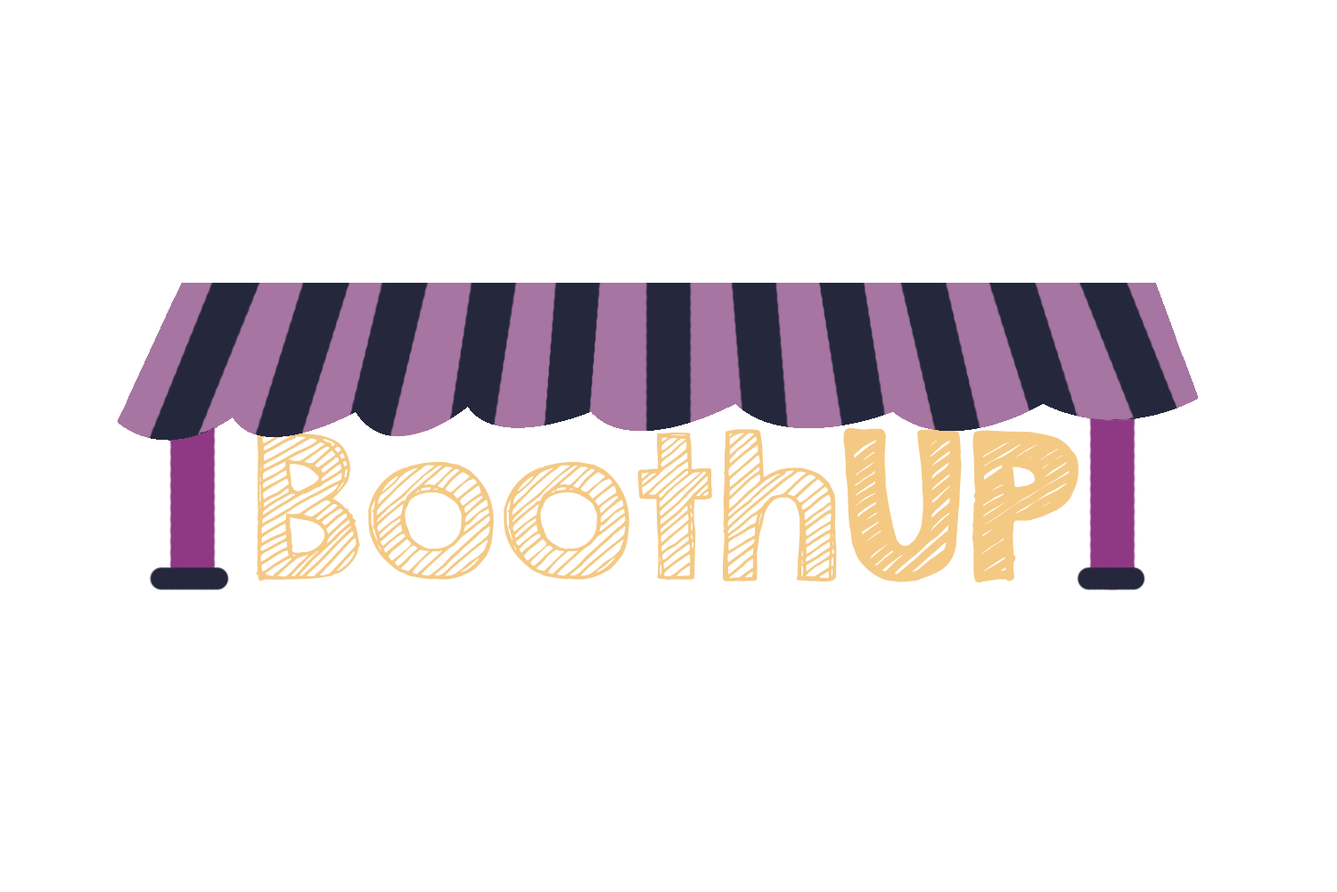
<style>
.page{position:relative;width:1337px;height:892px;background:#ffffff}
.page>*{position:absolute;margin:0}
.t1{font:178.3px "KGSecondChancesSketch";color:#f4c984;scale:1.1 1}
.t2{font:178.3px "KGSecondChancesSketch";color:#f4c984;font-weight:bold;scale:1.1 1}
</style>
<div class="page">
<p class="t1" style="left:256px;top:427px;width:823px;height:156px">Booth<span class="t2">UP</span></p>
</div>
